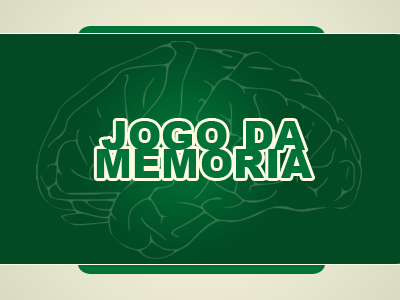
<style>
.page{position:relative;width:400px;height:300px;background:#014a24}
.page>*{position:absolute;margin:0}
.t1{font:40px "Arial-Black";letter-spacing:0.01em;color:#017338}
</style>
<div class="page">
<p class="t1" style="left:96px;top:121px;width:217px;height:57px;text-align:center">JOGO DA<br>MEMÓRIA</p>
</div>
